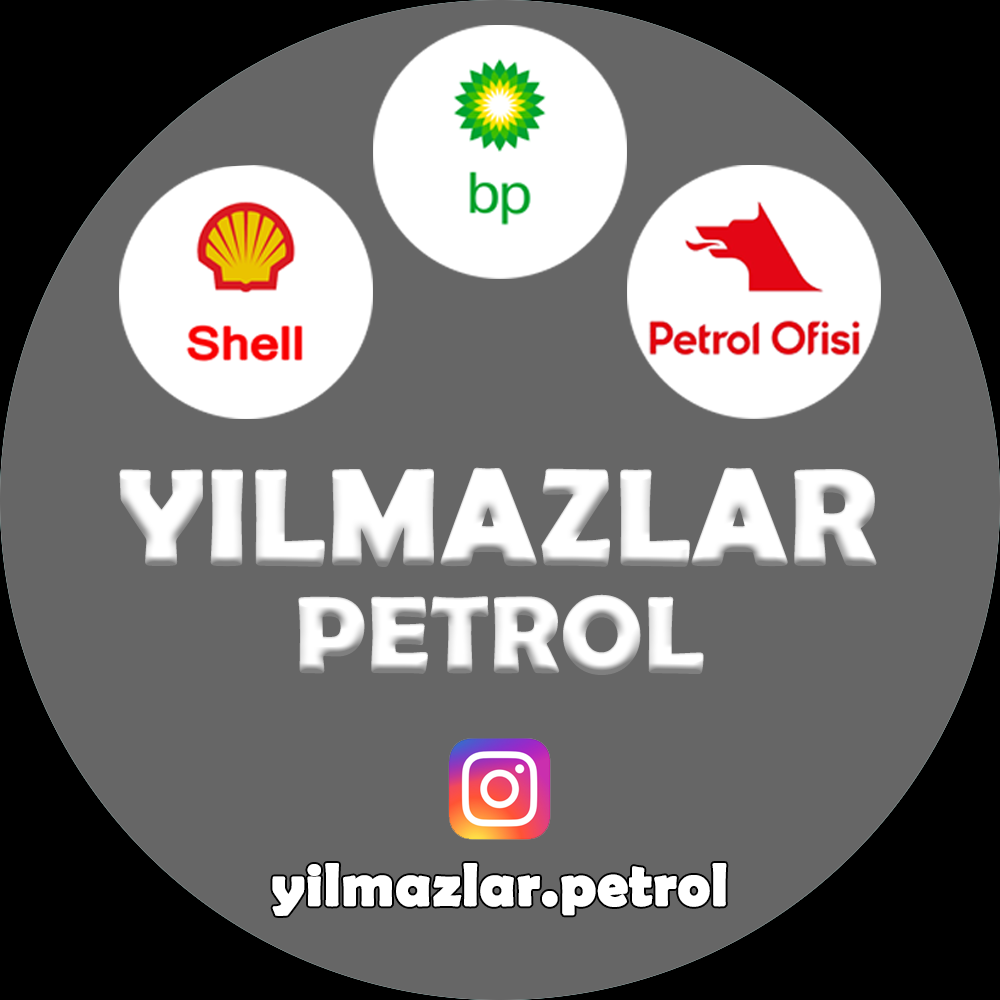
<style>
.page{position:relative;width:1000px;height:1000px;background:#666666}
.page>*{position:absolute;margin:0}
.t1{font:134.8px "BerlinSansFBDemi-Bold";color:#ffffff;font-weight:bold}
.t2{font:106.8px "BerlinSansFBDemi-Bold";color:#ffffff;font-weight:bold}
.t3{font:60px "BerlinSansFBDemi-Bold";color:#ffffff;font-weight:bold}
</style>
<div class="page">
<p class="t1" style="left:119px;top:467px;width:758px;height:100px">YILMAZLAR</p>
<p class="t2" style="left:298px;top:594px;width:406px;height:81px">PETROL</p>
<p class="t3" style="left:272px;top:863px;width:455px;height:53px">yilmazlar.petrol</p>
</div>
